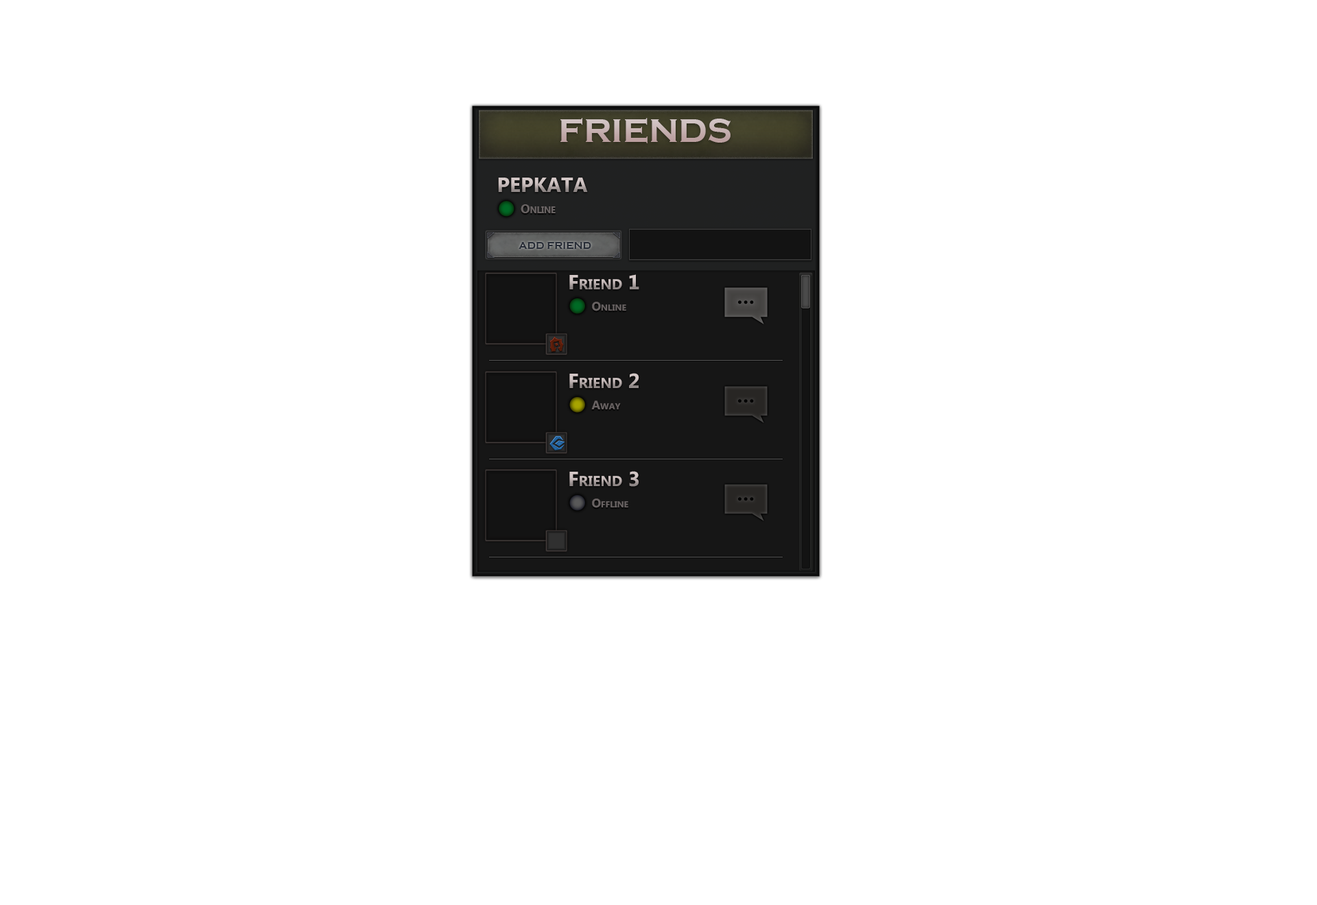
<style>
.page{position:relative;width:1317px;height:905px;background:#ffffff}
.page>*{position:absolute;margin:0}
.t1{font:34.3px "CopperplateGothic-Bold";color:#d1c4c4;font-variant:small-caps}
.t2{font:20.6px "MyanmarText-Bold";font-variant:small-caps}
.t3{font:12.3px "MyanmarText-Bold";color:#696363;font-variant:small-caps}
.t4{font:10.3px "CopperplateGothic-Bold";color:#272c36;font-variant:small-caps}
</style>
<div class="page">
<p class="t1" style="left:560px;top:118px;width:171px;height:25px">FRIENDS</p>
<p class="t2" style="left:498px;top:178px;width:90px;height:14px">PEPKATA</p>
<p class="t3" style="left:521px;top:204px;width:35px;height:9px">Online</p>
<p class="t4" style="left:519px;top:242px;width:72px;height:7px">ADD FRIEND</p>
<p class="t2" style="left:569px;top:274px;width:70px;height:15px">Friend 1</p>
<p class="t3" style="left:592px;top:302px;width:34px;height:9px">Online</p>
<p class="t2" style="left:569px;top:373px;width:70px;height:15px">Friend 2</p>
<p class="t3" style="left:591px;top:401px;width:30px;height:9px">Away</p>
<p class="t2" style="left:569px;top:471px;width:70px;height:16px">Friend 3</p>
<p class="t3" style="left:592px;top:499px;width:36px;height:9px">Offline</p>
</div>
